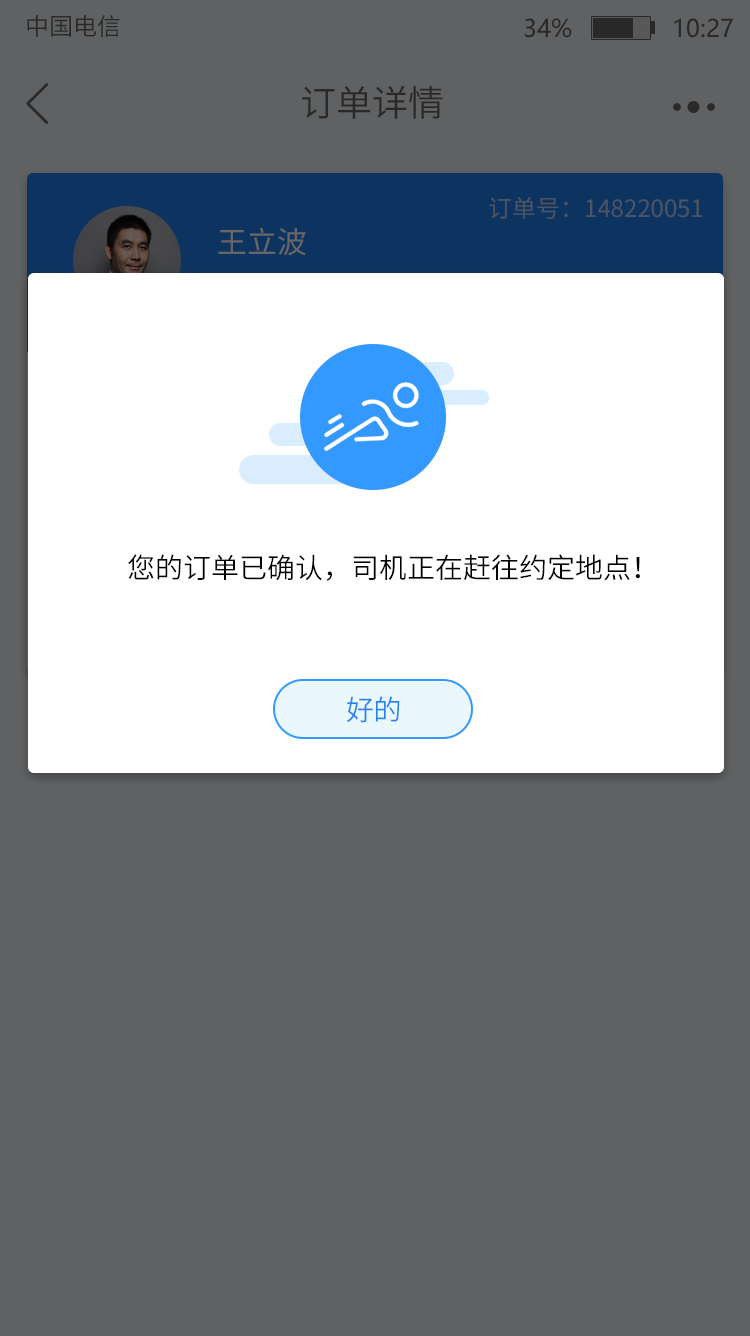
<style>
.page{position:relative;width:750px;height:1336px;background:#5f6162}
.page>*{position:absolute;margin:0}
.t1{font:24px "SourceHanSansCN-Normal";color:#282828}
.t2{font:24px "MicrosoftYaHei";color:#292929}
.t3{font:36px "SourceHanSansCN-Normal";color:#292929}
.t4{font:24px "SourceHanSansCN-Regular";color:#4b5464}
.t5{font:30px "SourceHanSansCN-Regular";color:#666666}
.t6{font:28px "SourceHanSansCN-Normal";color:#000000}
.t7{font:28px "SourceHanSansCN-Normal";letter-spacing:-0.025em;color:#2585f0}
</style>
<div class="page">
<p class="t1" style="left:27px;top:15px;width:93px;height:22px">中国电信</p>
<p class="t2" style="left:524px;top:18px;width:209px;height:20px">34%              10:27</p>
<p class="t3" style="left:302px;top:85px;width:141px;height:34px">订单详情</p>
<p class="t4" style="left:489px;top:197px;width:214px;height:22px">订单号：148220051</p>
<p class="t5" style="left:218px;top:227px;width:88px;height:29px">王立波</p>
<p class="t6" style="left:128px;top:554px;width:512px;height:27px">您的订单已确认，司机正在赶往约定地点！</p>
<p class="t7" style="left:346px;top:696px;width:54px;height:27px">好的</p>
</div>
